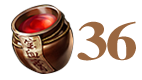
<style>
.page{position:relative;width:142px;height:80px;background:#ffffff}
.page>*{position:absolute;margin:0}
.t1{font:55.7px "FZXBSK--GBK1-0";letter-spacing:-0.05em;color:#9a6740;scale:1.15 1}
</style>
<div class="page">
<p class="t1" style="left:77px;top:21px;width:59px;height:40px">36</p>
</div>
